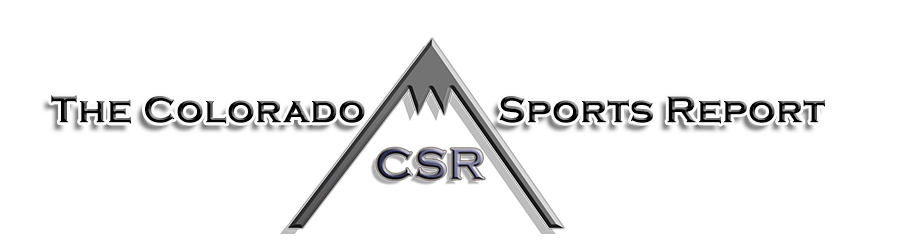
<style>
.page{position:relative;width:900px;height:250px;background:#ffffff}
.page>*{position:absolute;margin:0}
.t1{font:38px "CopperplateGothic-Bold";font-weight:bold}
</style>
<div class="page">
<p class="t1" style="left:51px;top:95px;width:774px;height:29px">The Colorado            Sports Report</p>
</div>
